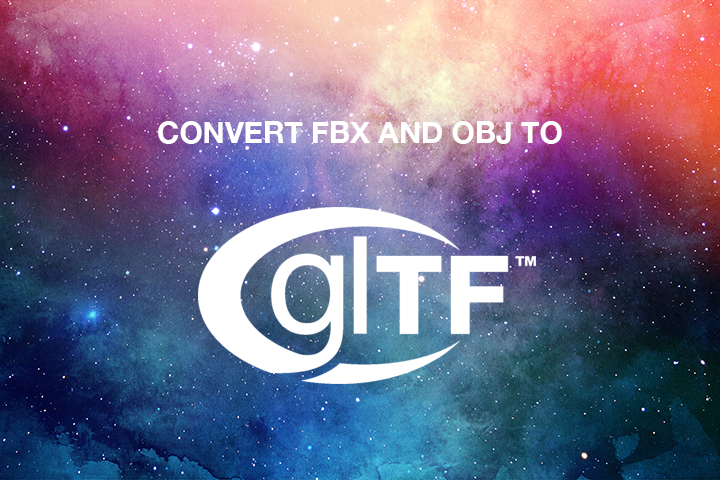
<style>
.page{position:relative;width:720px;height:480px}
.page>*{position:absolute;margin:0}
.t1{font:30px "HelveticaNeue-Bold";color:#ffffff}
</style>
<div class="page">
<p class="t1" style="left:158px;top:121px;width:404px;height:23px">CONVERT FBX AND OBJ TO</p>
</div>
